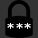
<style>
.page{position:relative;width:38px;height:38px;background:#333333}
.page>*{position:absolute;margin:0}
.t1{font:22.3px "ProximaNova-Regular";letter-spacing:0.025em;color:#ffffff}
</style>
<div class="page">
<p class="t1" style="left:7px;top:23px;width:24px;height:6px">***</p>
</div>
